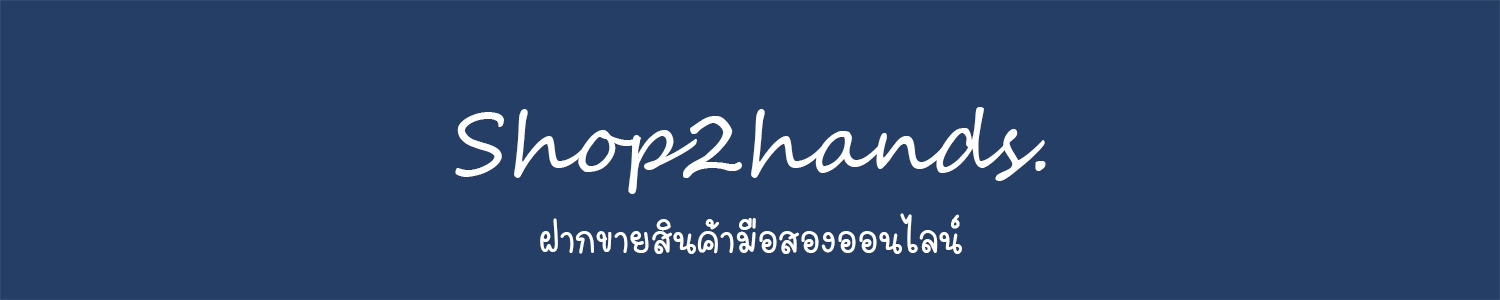
<style>
.page{position:relative;width:1500px;height:300px;background:#253e66}
.page>*{position:absolute;margin:0}
.t1{font:85.6px "SegoeScript";color:#ffffff}
.t2{font:54.3px "FCMuffinRegular";color:#ffffff}
</style>
<div class="page">
<p class="t1" style="left:455px;top:107px;width:591px;height:87px">Shop2hands.</p>
<p class="t2" style="left:540px;top:213px;width:422px;height:41px">ฝากขายสินค้ามือสองออนไลน์</p>
</div>
